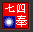
<style>
.page{position:relative;width:33px;height:32px;background:#f20000}
.page>*{position:absolute;margin:0}
.t1{font:10.4px "SimSun";color:#ffffff}
.t2{font:11.7px "SimSun";color:#ffffff}
</style>
<div class="page">
<p class="t1" style="left:5px;top:4px;width:20px;height:9px">七四</p>
<p class="t2" style="left:16px;top:15px;width:11px;height:12px">奉</p>
</div>
